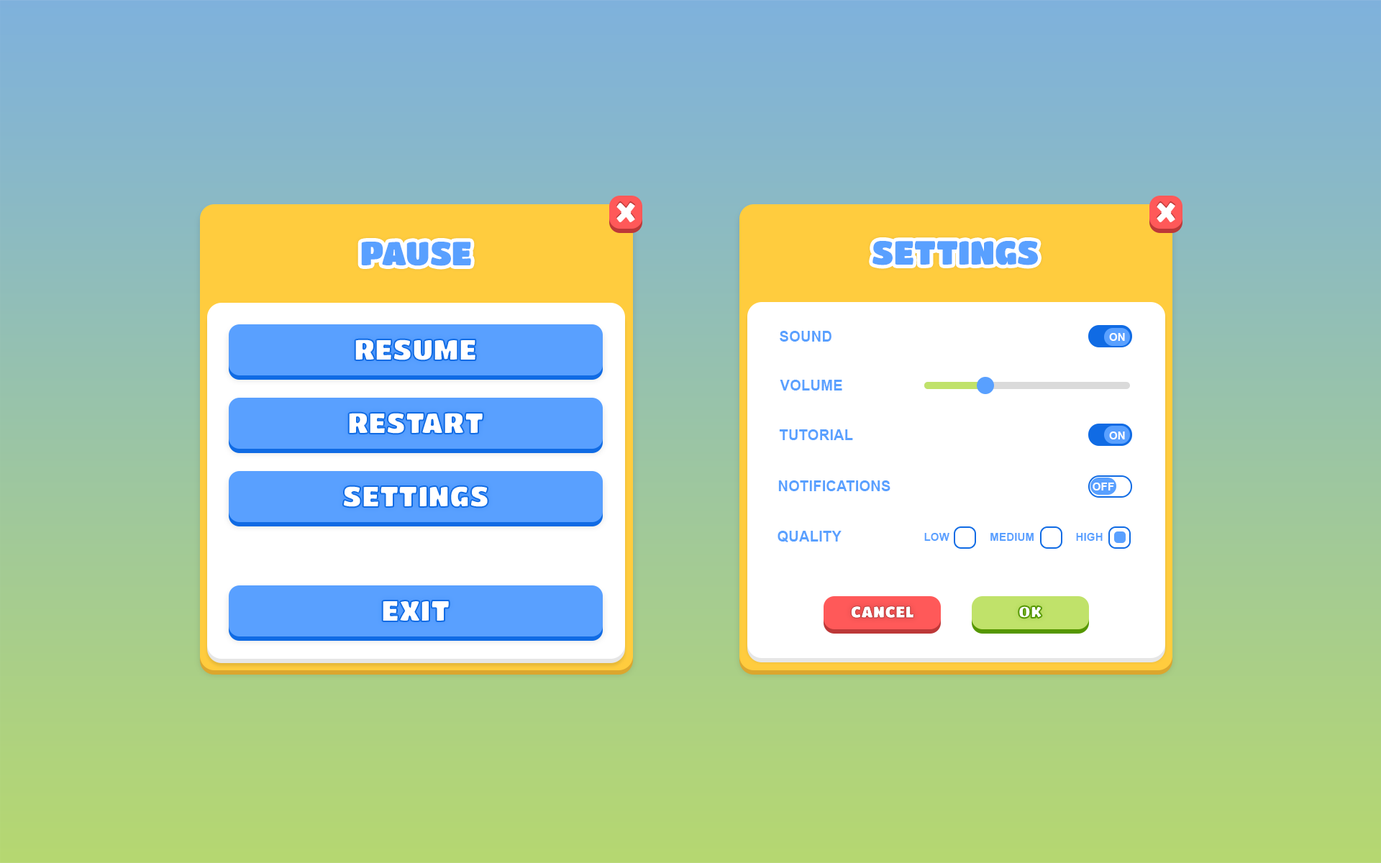
<style>
.page{position:relative;width:1381px;height:863px}
.page>*{position:absolute;margin:0}
.t1{font:33px "TitanOne";letter-spacing:0.01em;color:#59a0ff;text-transform:uppercase}
.t2{font:29.4px "TitanOne";color:#ffffff;text-transform:uppercase}
.t3{font:14.7px "Arial-BoldMT";color:#59a0ff;text-transform:uppercase}
.t4{font:11px "Arial-BoldMT";color:#ffffff;text-transform:uppercase}
.t5{font:11px "Arial-BoldMT";color:#59a0ff;text-transform:uppercase}
.t6{font:16.1px "TitanOne";color:#ffffff;text-transform:uppercase}
.t7{font:16.1px "TitanOne";text-transform:uppercase}
</style>
<div class="page">
<p class="t1" style="left:361px;top:242px;width:110px;height:24px">Pause</p>
<p class="t1" style="left:873px;top:241px;width:165px;height:24px">settings</p>
<p class="t2" style="left:355px;top:339px;width:121px;height:22px">resume</p>
<p class="t3" style="left:780px;top:331px;width:52px;height:11px">Sound</p>
<p class="t4" style="left:1109px;top:333px;width:16px;height:8px">on</p>
<p class="t3" style="left:780px;top:380px;width:62px;height:11px">Volume</p>
<p class="t2" style="left:348px;top:412px;width:135px;height:23px">restart</p>
<p class="t3" style="left:779px;top:429px;width:74px;height:11px">tutorial</p>
<p class="t4" style="left:1109px;top:432px;width:16px;height:8px">on</p>
<p class="t2" style="left:343px;top:486px;width:145px;height:22px">settings</p>
<p class="t3" style="left:778px;top:481px;width:113px;height:10px">notifications</p>
<p class="t4" style="left:1093px;top:483px;width:21px;height:8px">off</p>
<p class="t3" style="left:778px;top:531px;width:64px;height:11px">quality</p>
<p class="t5" style="left:924px;top:533px;width:26px;height:8px">low</p>
<p class="t5" style="left:991px;top:533px;width:43px;height:8px">medium</p>
<p class="t5" style="left:1076px;top:533px;width:27px;height:8px">high</p>
<p class="t2" style="left:382px;top:601px;width:68px;height:21px">exit</p>
<p class="t6" style="left:851px;top:606px;width:63px;height:13px">cancel</p>
<p class="t7" style="left:1019px;top:606px;width:23px;height:13px">ok</p>
</div>
